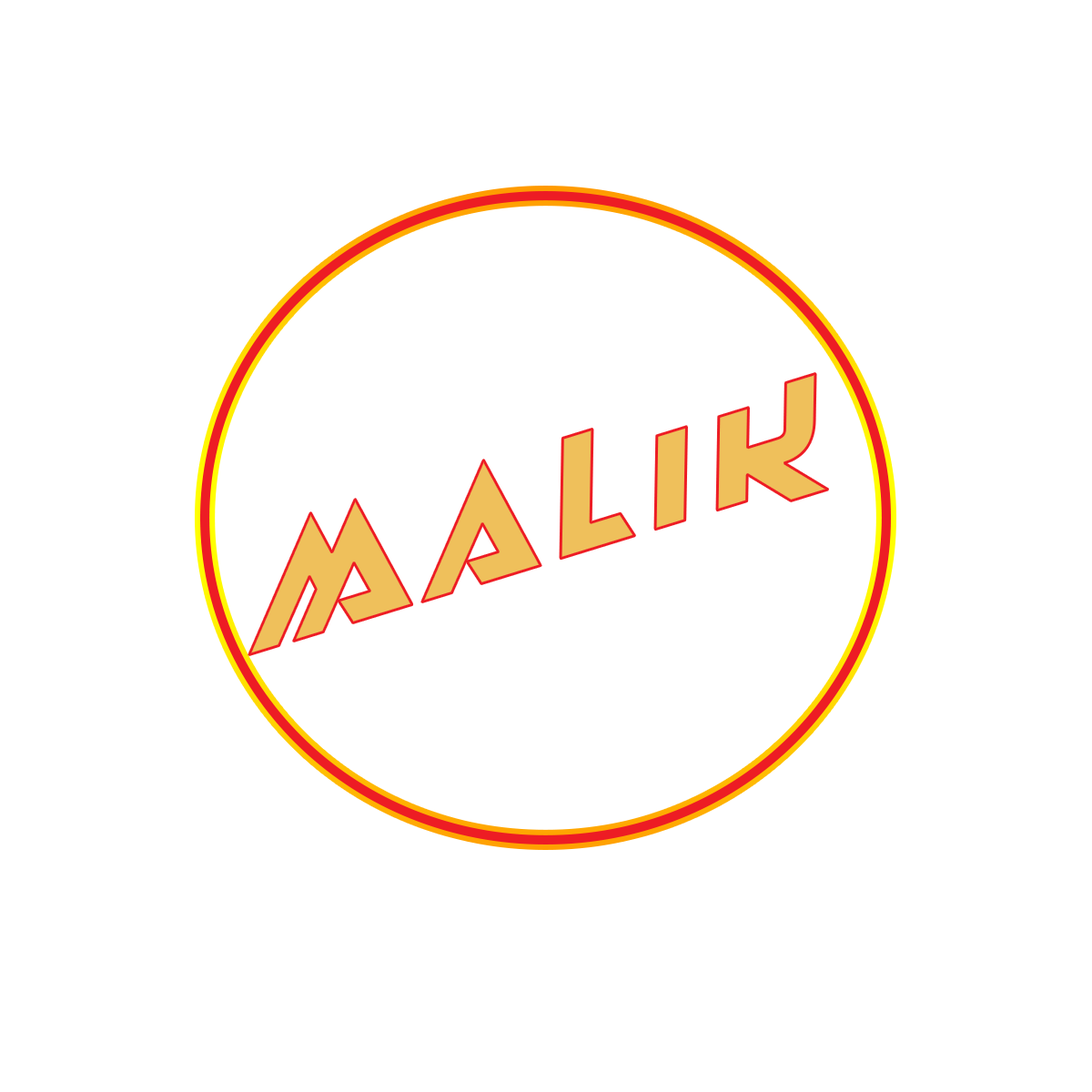
<style>
.page{position:relative;width:1092px;height:1092px;background:#ffffff}
.page>*{position:absolute;margin:0}
.t1{font:130.2px "DeadlyAdvance-Italic";letter-spacing:0.16em;color:#efc05b;scale:1.22 1}
</style>
<div class="page">
<p class="t1" style="left:248px;top:373px;width:580px;height:282px;rotate:-17deg">Malik</p>
</div>
